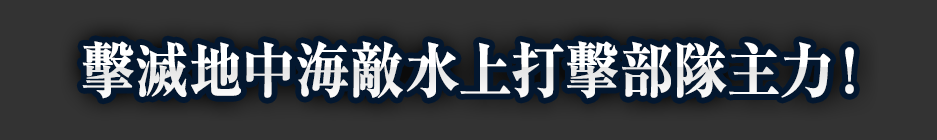
<style>
.page{position:relative;width:937px;height:140px;background:#333333}
.page>*{position:absolute;margin:0}
.t1{font:60px "RyuminPr6N-ExBold";color:#ffffff;font-weight:bold;scale:0.9 1}
</style>
<div class="page">
<p class="t1" style="left:82px;top:41px;width:772px;height:58px">擊滅地中海敵水上打擊部隊主力！</p>
</div>
